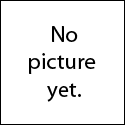
<style>
.page{position:relative;width:125px;height:125px;background:#ffffff}
.page>*{position:absolute;margin:0}
.t1{font:23px "MyriadPro-Regular";color:#000000}
</style>
<div class="page">
<p class="t1" style="left:29px;top:26px;width:67px;height:76px;text-align:center">No<br>picture <br>yet.</p>
</div>
